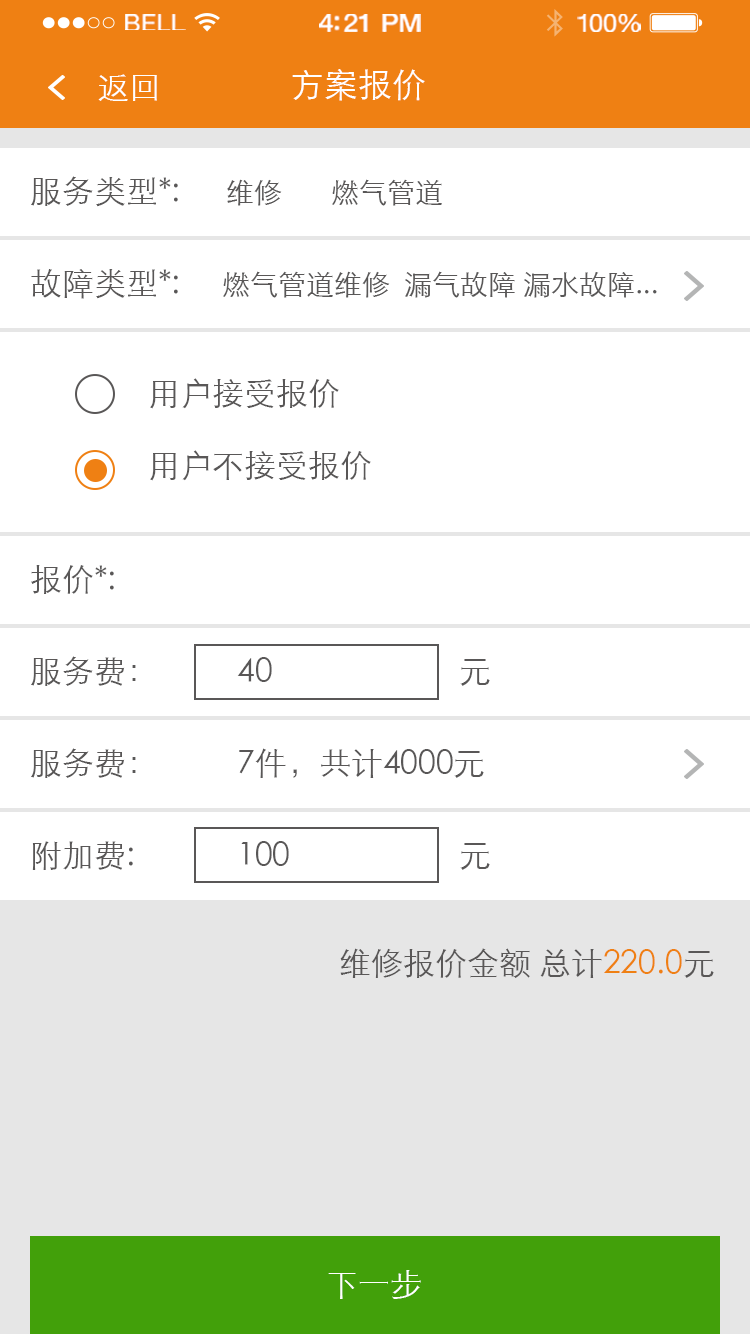
<style>
.page{position:relative;width:750px;height:1334px;background:#ffffff}
.page>*{position:absolute;margin:0}
.t1{font:23.3px "HelveticaNeue";letter-spacing:0.02em;color:#ffffff;scale:1.06 1}
.t2{font:25.3px "HelveticaNeue-Medium";letter-spacing:-0.02em;color:#ffffff;scale:1.06 1}
.t3{font:24.3px "HelveticaNeue";letter-spacing:-0.02em;color:#ffffff;scale:1.06 1}
.t4{font:32px "STXihei";color:#ffffff}
.t5{font:34px "STXihei";color:#ffffff}
.t6{font:32px "STXihei";color:#595757}
.t7{font:28px "STXihei";color:#595757}
.t8{font:32px "STXihei";color:#ef8013}
</style>
<div class="page">
<p class="t1" style="left:125px;top:14px;width:61px;height:16px">BELL</p>
<p class="t2" style="left:319px;top:14px;width:102px;height:18px">4:21 PM</p>
<p class="t3" style="left:577px;top:14px;width:64px;height:18px">100%</p>
<p class="t4" style="left:98px;top:74px;width:59px;height:27px">返回</p>
<p class="t5" style="left:292px;top:69px;width:133px;height:32px">方案报价</p>
<p class="t6" style="left:31px;top:176px;width:147px;height:31px">服务类型*:</p>
<p class="t7" style="left:227px;top:179px;width:215px;height:27px">维修       燃气管道</p>
<p class="t6" style="left:31px;top:269px;width:147px;height:30px">故障类型*:</p>
<p class="t7" style="left:223px;top:271px;width:434px;height:27px">燃气管道维修  漏气故障 漏水故障...</p>
<p class="t6" style="left:150px;top:378px;width:189px;height:31px">用户接受报价</p>
<p class="t6" style="left:150px;top:450px;width:221px;height:31px">用户不接受报价</p>
<p class="t6" style="left:31px;top:565px;width:83px;height:29px">报价*:</p>
<p class="t6" style="left:31px;top:656px;width:105px;height:30px">服务费：</p>
<p class="t6" style="left:237px;top:657px;width:35px;height:25px">40</p>
<p class="t6" style="left:460px;top:659px;width:30px;height:27px">元</p>
<p class="t6" style="left:31px;top:748px;width:105px;height:30px">服务费：</p>
<p class="t6" style="left:239px;top:748px;width:245px;height:30px">7件，共计4000元</p>
<p class="t6" style="left:32px;top:841px;width:101px;height:29px">附加费:</p>
<p class="t6" style="left:241px;top:841px;width:48px;height:25px">100</p>
<p class="t6" style="left:460px;top:843px;width:30px;height:27px">元</p>
<p class="t6" style="left:340px;top:948px;width:374px;height:30px">维修报价金额 总计<span class="t8">220.0</span>元</p>
<p class="t4" style="left:328px;top:1270px;width:93px;height:29px">下一步</p>
</div>
